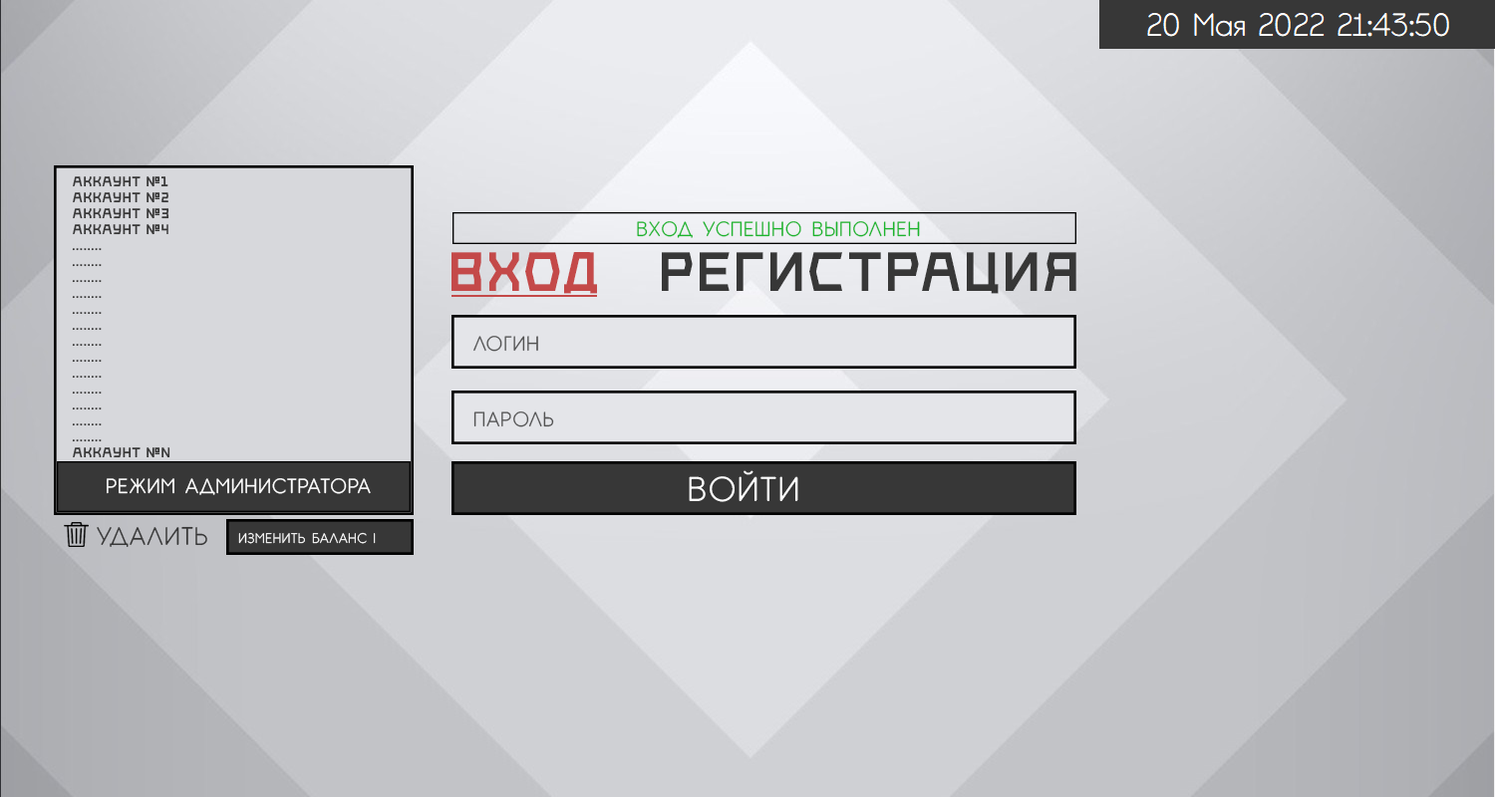
<style>
.page{position:relative;width:1495px;height:797px}
.page>*{position:absolute;margin:0}
.t1{font:13.3px "Black-Acute-Regular";letter-spacing:0.06em;color:#373737;text-transform:uppercase}
.t2{font:19.9px "CM_GARDEN_R";letter-spacing:0.06em;color:#1bb52d;text-transform:uppercase}
.t3{font:53.2px "Black-Acute-Regular";letter-spacing:0.06em;color:#c44949;text-transform:uppercase}
.t4{font:53.2px "Black-Acute-Regular";letter-spacing:0.06em;color:#373737;text-transform:uppercase}
.t5{font:19.9px "CM_GARDEN_R";letter-spacing:0.06em;color:#ffffff;text-transform:uppercase}
.t6{font:24.4px "CM_GARDEN_R";letter-spacing:0.06em;color:#373737;text-transform:uppercase}
.t7{font:13.3px "CM_GARDEN_R";letter-spacing:0.06em;color:#ffffff;text-transform:uppercase}
</style>
<div class="page">
<p class="t1" style="left:72px;top:176px;width:98px;height:283px">аккаунт №1<br>аккаунт №2<br>аккаунт №3<br>аккаунт №4<br>........<br>........<br>........<br>........<br>........<br>........<br>........<br>........<br>........<br>........<br>........<br>........<br>........<br>АККАУНТ №n</p>
<p class="t2" style="left:637px;top:221px;width:283px;height:17px">вход успешно выполнен</p>
<p class="t3" style="left:452px;top:252px;width:145px;height:42px">вход</p>
<p class="t4" style="left:662px;top:252px;width:415px;height:42px">регистрация</p>
<p class="t5" style="left:107px;top:478px;width:264px;height:17px">режим администратора</p>
<p class="t6" style="left:97px;top:526px;width:110px;height:21px">удалить</p>
<p class="t7" style="left:238px;top:532px;width:138px;height:12px">изменить баланс |</p>
</div>
